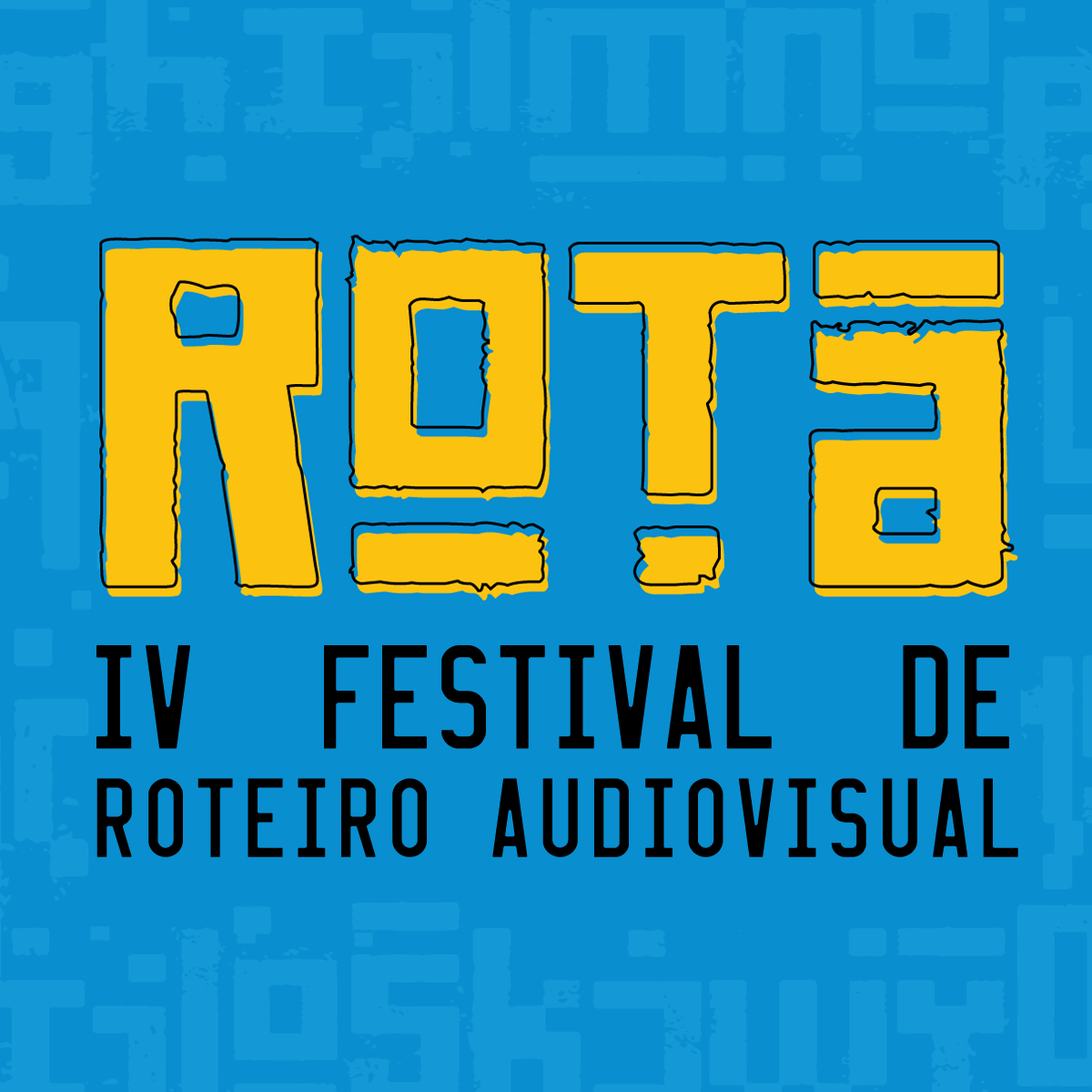
<style>
.page{position:relative;width:1092px;height:1092px;background:#098ecf}
.page>*{position:absolute;margin:0}
.t1{font:102.6px "LICENSEPLATEUSA";letter-spacing:0.05em;color:#000000;text-transform:uppercase;font-weight:bold}
.t2{font:77.9px "LICENSEPLATEUSA";letter-spacing:0.1em;color:#000000;text-transform:uppercase;font-weight:bold}
</style>
<div class="page">
<p class="t1" style="left:96px;top:645px;width:913px;height:104px">IV  festival  de</p>
<p class="t2" style="left:96px;top:778px;width:922px;height:79px">roteiro audiovisual</p>
</div>
